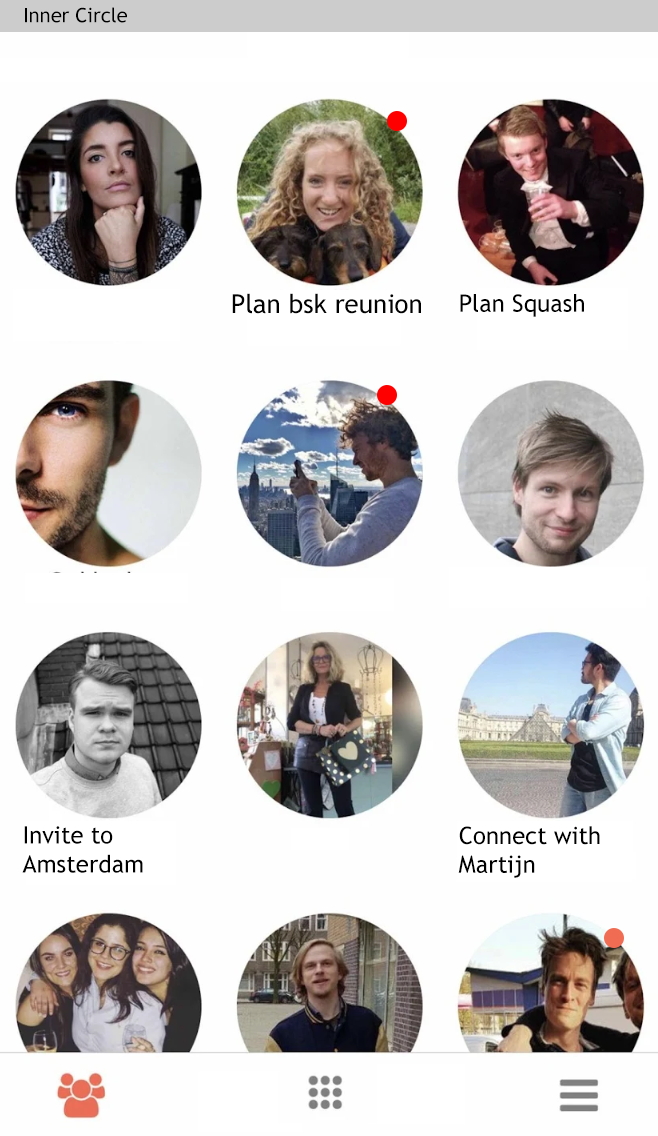
<style>
.page{position:relative;width:658px;height:1136px;background:#fefefe}
.page>*{position:absolute;margin:0}
.t1{font:20px "TrebuchetMS";color:#000000}
.t2{font:26px "TrebuchetMS";color:#010101}
.t3{font:12px "TrebuchetMS";color:#000000}
.t4{font:24px "TrebuchetMS";color:#000000}
</style>
<div class="page">
<p class="t1" style="left:25px;top:7px;width:102px;height:16px">Inner Circle</p>
<p class="t2" style="left:232px;top:293px;width:189px;height:21px">Plan bsk reunion</p>
<p class="t3" style="left:460px;top:294px;width:124px;height:23px">Plan Squash</p>
<p class="t3" style="left:22px;top:826px;width:121px;height:47px">Invite to Amsterdam</p>
<p class="t4" style="left:458px;top:826px;width:142px;height:52px">Connect with <br>Martijn</p>
</div>
